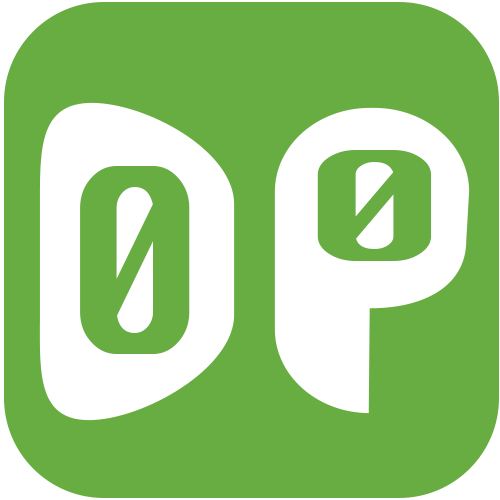
<style>
.page{position:relative;width:500px;height:500px;background:#68ad42}
.page>*{position:absolute;margin:0}
.t1{font:148.7px "Silom";letter-spacing:-0.025em;color:#68ad42;scale:1.52 1}
.t2{font:250.4px "Silom";letter-spacing:-0.025em;color:#68ad42;scale:0.87 1}
</style>
<div class="page">
<p class="t1" style="left:317px;top:150px;width:115px;height:111px">0</p>
<p class="t2" style="left:80px;top:166px;width:110px;height:188px">0</p>
</div>
